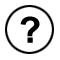
<style>
.page{position:relative;width:60px;height:60px;background:#ffffff}
.page>*{position:absolute;margin:0}
.t1{font:36px "Arial-BoldMT";color:#000000;text-transform:uppercase}
</style>
<div class="page">
<p class="t1" style="left:20px;top:16px;width:20px;height:27px">?</p>
</div>
